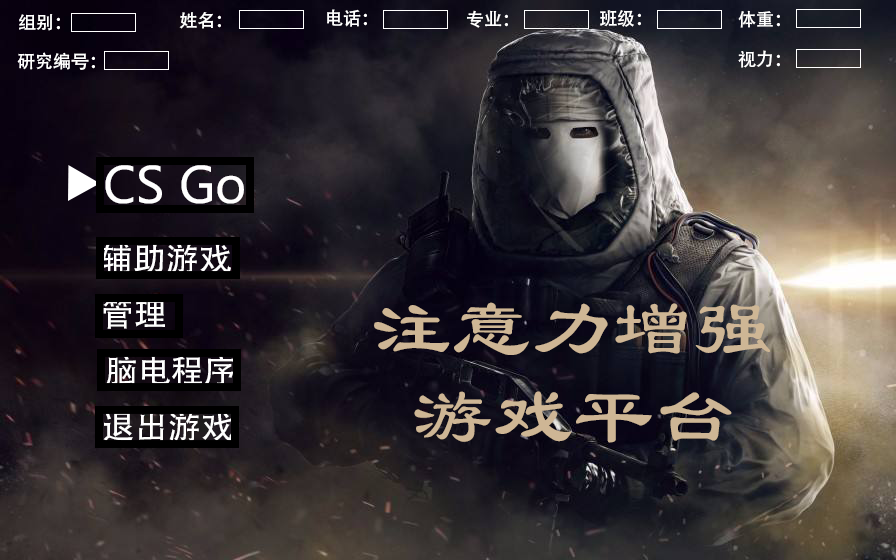
<style>
.page{position:relative;width:896px;height:560px}
.page>*{position:absolute;margin:0}
.t1{font:18px "AdobeHeitiStd-Regular";color:#ffffff}
.t2{font:49.2px "MicrosoftYaHei";color:#ffffff}
.t3{font:32.8px "AdobeHeitiStd-Regular";color:#ffffff}
.t4{font:80.6px "LiSu";color:#ceb695}
</style>
<div class="page">
<p class="t1" style="left:19px;top:14px;width:41px;height:17px">组别：</p>
<p class="t1" style="left:179px;top:12px;width:42px;height:17px">姓名：</p>
<p class="t1" style="left:327px;top:9px;width:40px;height:18px">电话：</p>
<p class="t1" style="left:467px;top:10px;width:41px;height:18px">专业：</p>
<p class="t1" style="left:600px;top:10px;width:41px;height:17px">班级：</p>
<p class="t1" style="left:738px;top:10px;width:42px;height:18px">体重：</p>
<p class="t1" style="left:17px;top:52px;width:78px;height:18px">研究编号：</p>
<p class="t1" style="left:738px;top:50px;width:42px;height:18px">视力：</p>
<p class="t2" style="left:105px;top:165px;width:139px;height:39px">CS Go</p>
<p class="t3" style="left:101px;top:243px;width:130px;height:31px">辅助游戏</p>
<p class="t3" style="left:103px;top:298px;width:62px;height:31px">管理</p>
<p class="t4" style="left:374px;top:302px;width:396px;height:53px">注意力增强</p>
<p class="t3" style="left:106px;top:355px;width:128px;height:31px">脑电程序</p>
<p class="t4" style="left:414px;top:391px;width:318px;height:52px">游戏平台</p>
<p class="t3" style="left:103px;top:411px;width:130px;height:31px">退出游戏</p>
</div>
